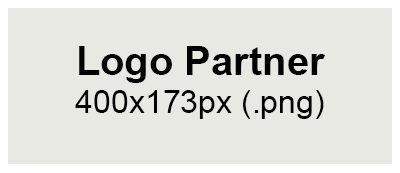
<style>
.page{position:relative;width:400px;height:173px;background:#e9e9e4}
.page>*{position:absolute;margin:0}
.t1{font:32px "ArialMT";color:#030303}
.t2{font:40px "Arial-BoldMT";color:#030303}
</style>
<div class="page">
<p class="t1" style="left:75px;top:46px;width:250px;height:73px;text-align:center"><span class="t2">Logo Partner <br></span>400x173px (.png)</p>
</div>
